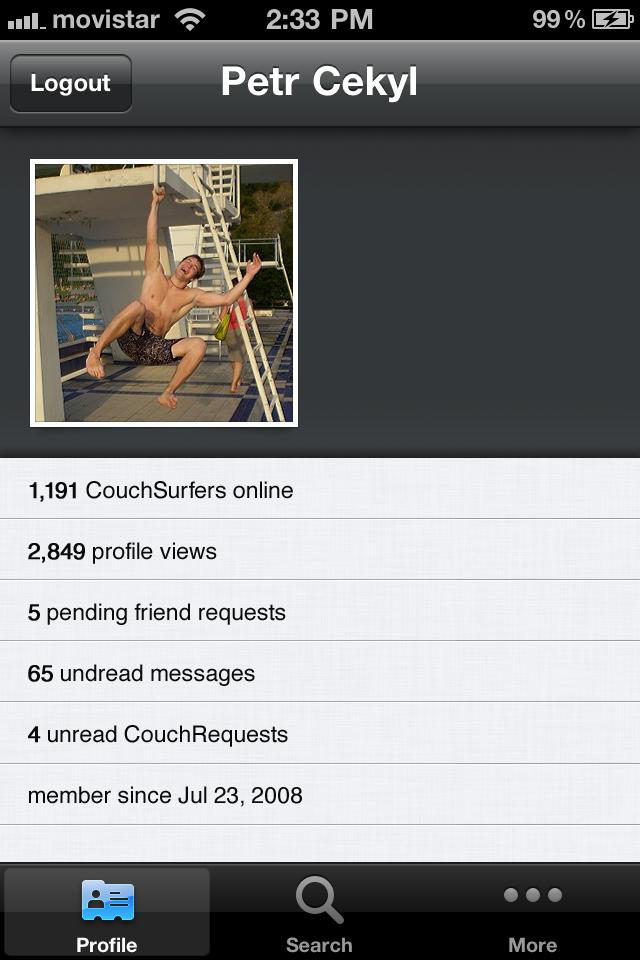
<style>
.page{position:relative;width:640px;height:960px}
.page>*{position:absolute;margin:0}
.t1{font:23px/61px "Helvetica";color:#0b0b0b}
.t2{font:23px/61px "Helvetica";color:#0b0b0b;font-weight:bold}
</style>
<div class="page">
<p class="t1" style="left:28px;top:481px;width:274px;height:326px"><span class="t2">1,191</span> CouchSurfers online<br><span class="t2">2,849</span> profile views<br><span class="t2">5</span> pending friend requests<br><span class="t2">65</span> undread messages<br><span class="t2">4</span> unread CouchRequests<br>member since Jul 23, 2008</p>
</div>
